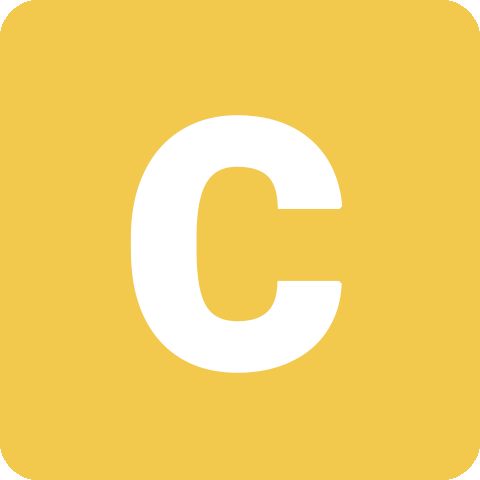
<style>
.page{position:relative;width:480px;height:480px;background:#f2c94c}
.page>*{position:absolute;margin:0}
.t1{font:345.4px "Roboto-Black";color:#ffffff;font-weight:bold}
</style>
<div class="page">
<p class="t1" style="left:130px;top:115px;width:213px;height:258px">C</p>
</div>
